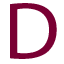
<style>
.page{position:relative;width:64px;height:64px;background:#ffffff}
.page>*{position:absolute;margin:0}
.t1{font:83.3px "MyriadPro-Regular";color:#790033}
</style>
<div class="page">
<p class="t1" style="left:10px;top:3px;width:47px;height:56px">D</p>
</div>
